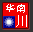
<style>
.page{position:relative;width:33px;height:32px;background:#f20000}
.page>*{position:absolute;margin:0}
.t1{font:10.4px "SimSun";color:#ffffff}
.t2{font:11.7px "SimSun";color:#ffffff}
</style>
<div class="page">
<p class="t1" style="left:6px;top:4px;width:19px;height:9px">华南</p>
<p class="t2" style="left:16px;top:15px;width:11px;height:12px">川</p>
</div>
